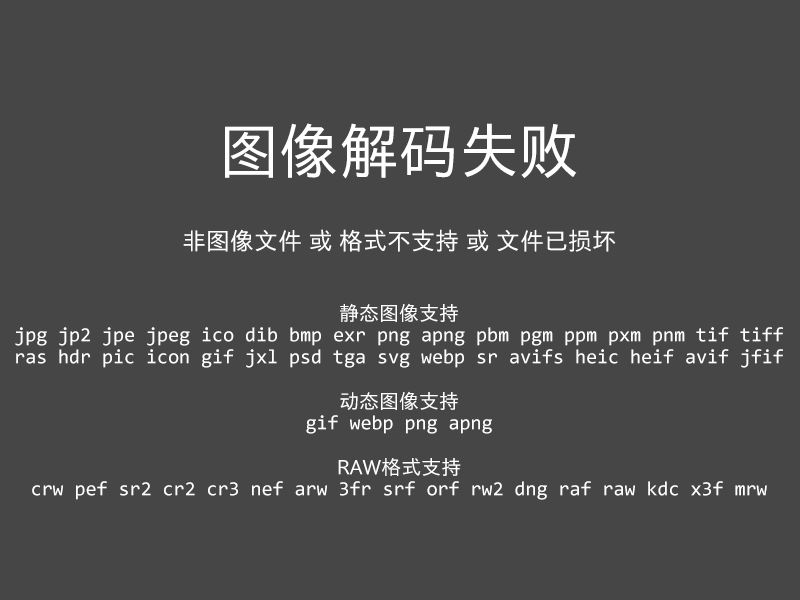
<style>
.page{position:relative;width:800px;height:600px;background:#464646}
.page>*{position:absolute;margin:0}
.t1{font:24px/108px "LXGWNeoXiHei";color:#ffffff}
.t2{font:60px/108px "LXGWNeoXiHei";color:#ffffff}
.t3{font:20px/22px "Consolas";color:#ffffff}
.t4{font:20px/22px "LXGWNeoXiHei";color:#ffffff}
</style>
<div class="page">
<p class="t1" style="left:183px;top:123px;width:433px;height:129px;text-align:center"><span class="t2">图像解码失败<br></span>非图像文件 或 格式不支持 或 文件已损坏</p>
<p class="t3" style="left:15px;top:303px;width:768px;height:197px;text-align:center"><span class="t4">静态图像支持<br></span>jpg jp2 jpe jpeg ico dib bmp exr png apng pbm pgm ppm pxm pnm tif tiff<br>ras hdr pic icon gif jxl psd tga svg webp sr avifs heic heif avif jfif<br><span class="t4"><br>动态图像支持<br></span>gif webp png apng<br><span class="t4"><br>RAW格式支持<br></span>crw pef sr2 cr2 cr3 nef arw 3fr srf orf rw2 dng raf raw kdc x3f mrw</p>
</div>
